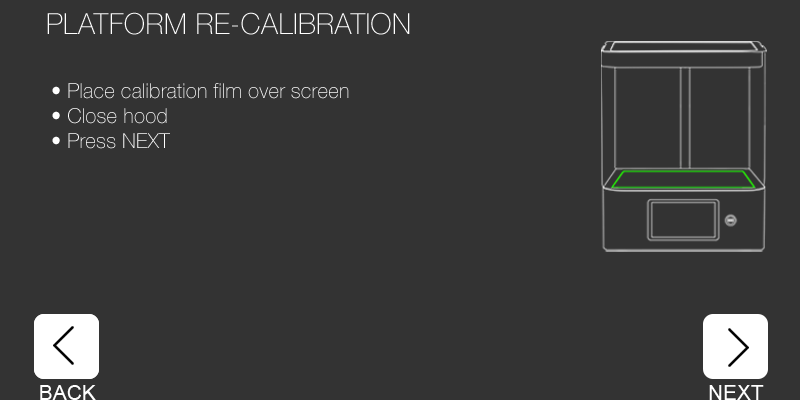
<style>
.page{position:relative;width:800px;height:400px;background:#333333}
.page>*{position:absolute;margin:0}
.t1{font:20.8px "HelveticaNeue-Thin";color:#ffffff}
</style>
<div class="page">
<p class="t1" style="left:52px;top:83px;width:297px;height:66px">• Place calibration film over screen<br>• Close hood<br>• Press NEXT</p>
</div>
